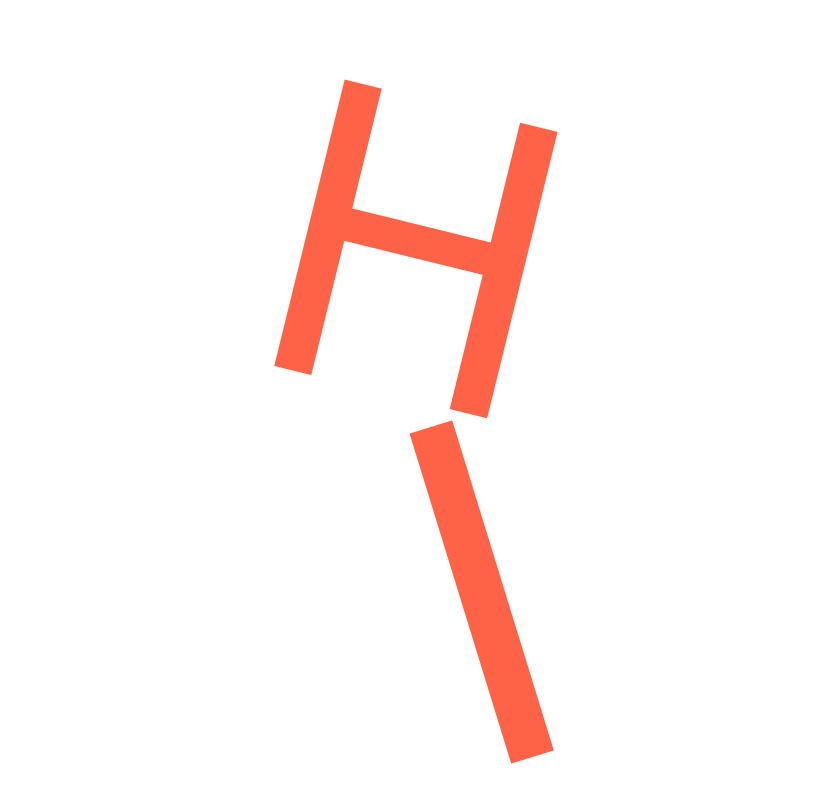
<style>
.page{position:relative;width:832px;height:785px;background:#ffffff}
.page>*{position:absolute;margin:0}
.t1{font:437.5px "MyriadPro-Regular";color:#ff6347}
.t2{font:512.2px "MyriadPro-Regular";color:#ff6347}
</style>
<div class="page">
<p class="t1" style="left:274px;top:79px;width:284px;height:340px;rotate:14deg">H</p>
<p class="t2" style="left:409px;top:420px;width:145px;height:344px;rotate:-17deg">I</p>
</div>
